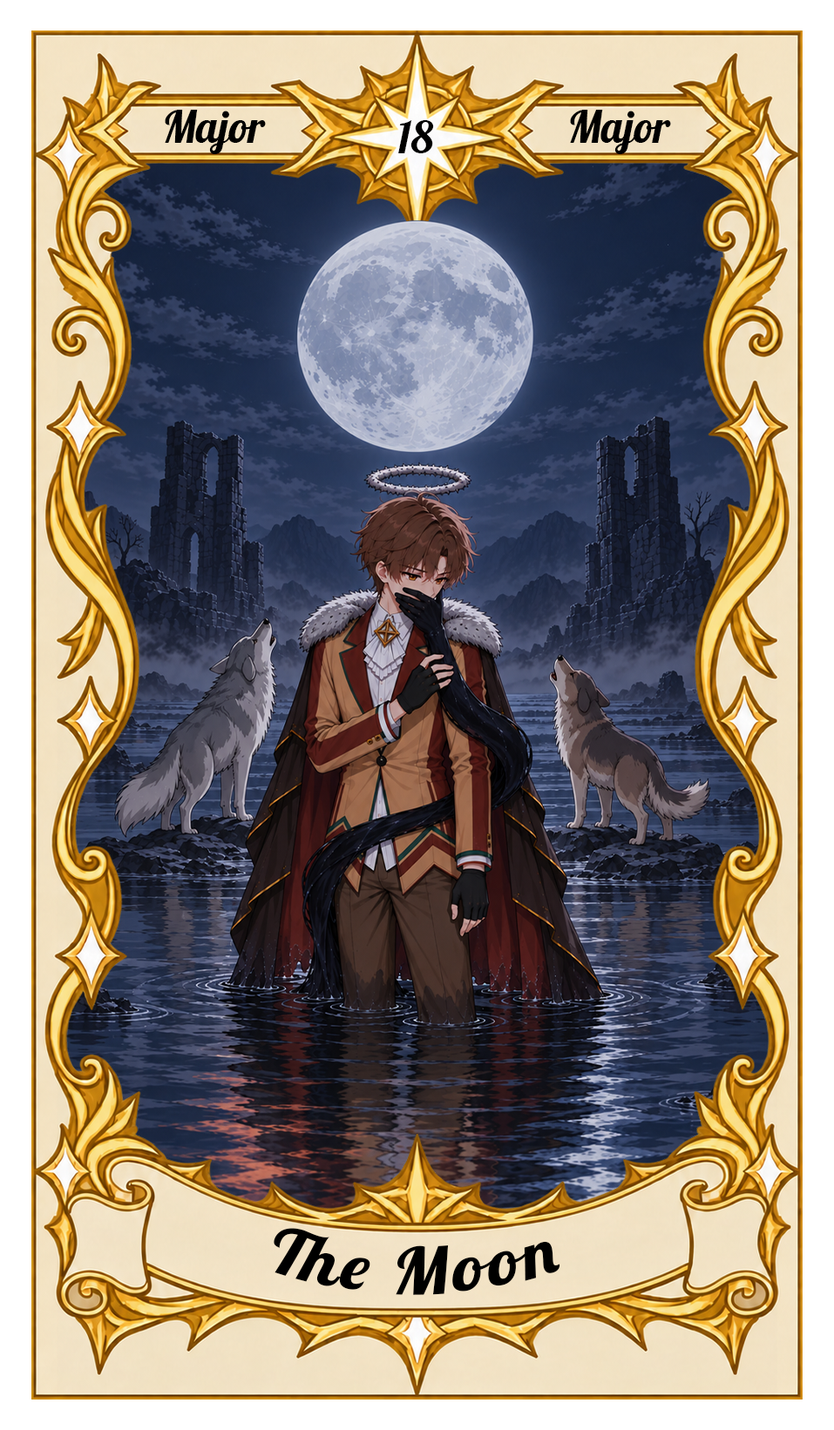
<style>
.page{position:relative;width:834px;height:1430px}
.page>*{position:absolute;margin:0}
.t1{font:43.6px "Lobster-Regular";color:#000000}
.t2{font:65.3px "Lobster-Regular";letter-spacing:0.05em;color:#000000}
</style>
<div class="page">
<p class="t1" style="left:165px;top:110px;width:101px;height:44px">Major</p>
<p class="t1" style="left:570px;top:110px;width:101px;height:44px">Major</p>
<p class="t1" style="left:398px;top:120px;width:36px;height:33px">18</p>
<p class="t2" style="left:274px;top:1228px;width:286px;height:67px">The Moon</p>
</div>
